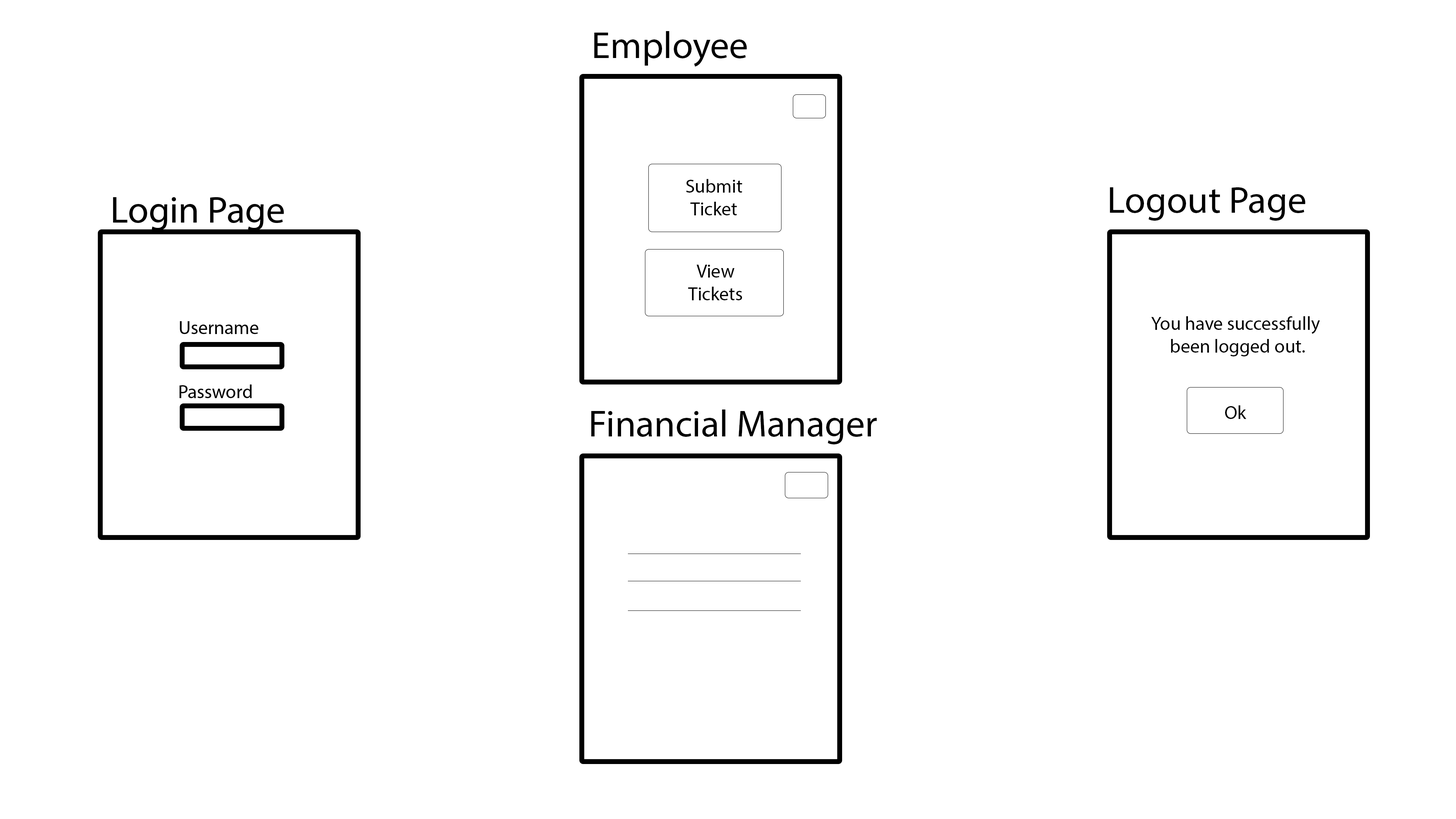
<style>
.page{position:relative;width:1456px;height:819px;background:#ffffff}
.page>*{position:absolute;margin:0}
.t1{font:37.9px "MyriadPro-Regular";color:#000000}
.t2{font:19px "MyriadPro-Regular";color:#000000}
.t3{font:4.5px "MyriadPro-Regular";color:#000000}
</style>
<div class="page">
<p class="t1" style="left:594px;top:31px;width:153px;height:36px">Employee</p>
<p class="t2" style="left:686px;top:179px;width:56px;height:36px;text-align:center">Submit<br>Ticket</p>
<p class="t1" style="left:1110px;top:187px;width:195px;height:34px">Logout Page</p>
<p class="t3" style="left:688px;top:265px;width:54px;height:35px;text-align:center">View<br>Tickets</p>
<p class="t2" style="left:1151px;top:316px;width:169px;height:40px;text-align:center">You have successfully <br>been logged out.</p>
<p class="t1" style="left:591px;top:409px;width:286px;height:35px">Financial Manager</p>
<p class="t3" style="left:1225px;top:405px;width:21px;height:14px;text-align:center">Ok</p>
</div>
